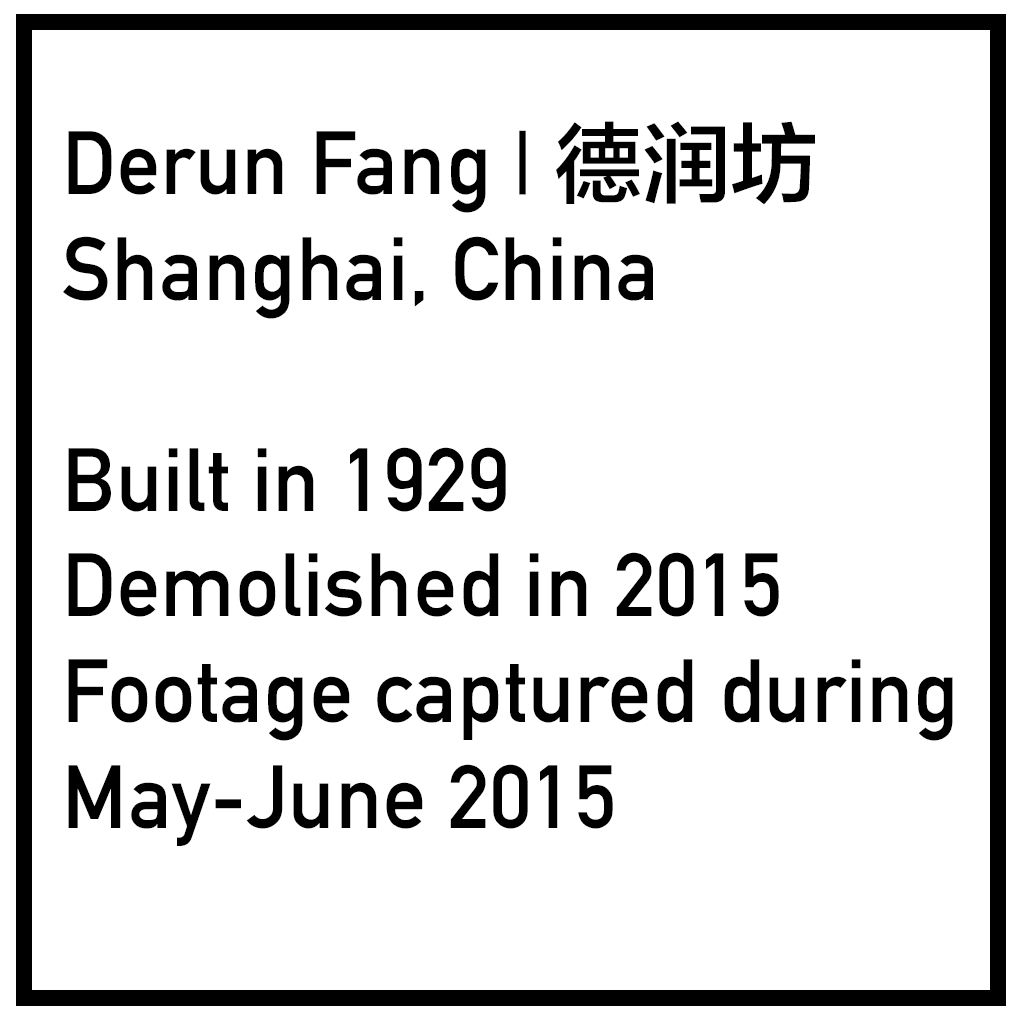
<style>
.page{position:relative;width:1024px;height:1024px;background:#ffffff}
.page>*{position:absolute;margin:0}
.t1{font:88px "DINAlternate-Bold";color:#000000}
.t2{font:88px "FZLTZHK--GBK1-0";color:#000000}
</style>
<div class="page">
<p class="t1" style="left:63px;top:121px;width:890px;height:725px">Derun Fang | <span class="t2">德润坊<br></span>Shanghai, China<br><br>Built in 1929<br>Demolished in 2015<br>Footage captured during<br>May-June 2015</p>
</div>
